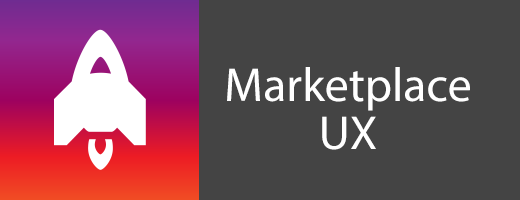
<style>
.page{position:relative;width:520px;height:200px;background:#444444}
.page>*{position:absolute;margin:0}
.t1{font:48px/48px "MyriadPro-Regular";color:#ffffff}
</style>
<div class="page">
<p class="t1" style="left:227px;top:67px;width:243px;height:83px;text-align:center">Marketplace UX</p>
</div>
